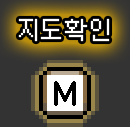
<style>
.page{position:relative;width:130px;height:127px;background:#333333}
.page>*{position:absolute;margin:0}
.t1{font:36px "Silver";color:#ffffff}
</style>
<div class="page">
<p class="t1" style="left:18px;top:18px;width:92px;height:24px">지도확인</p>
</div>
